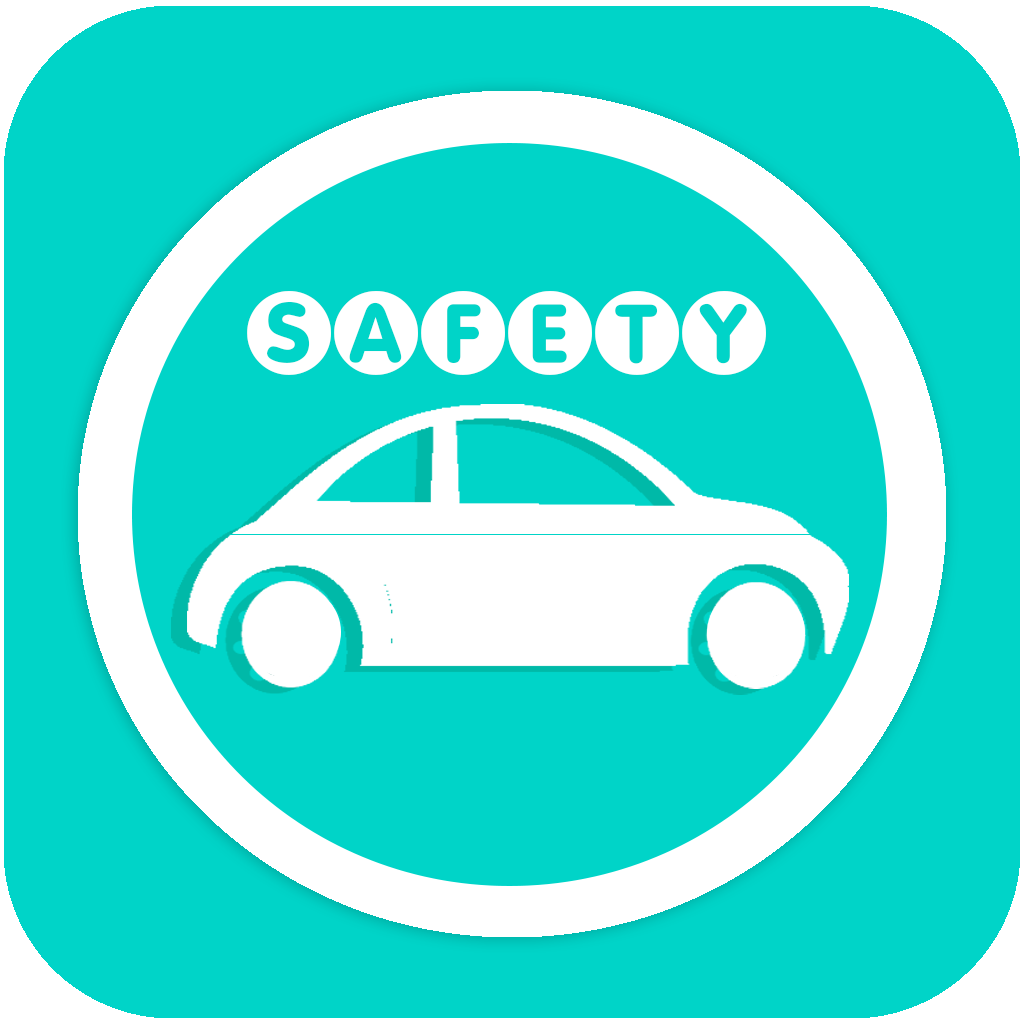
<style>
.page{position:relative;width:1024px;height:1024px;background:#00d4c8}
.page>*{position:absolute;margin:0}
.t1{font:102.4px "Circled";color:#ffffff}
</style>
<div class="page">
<p class="t1" style="left:247px;top:291px;width:519px;height:84px">SAFETY</p>
</div>
